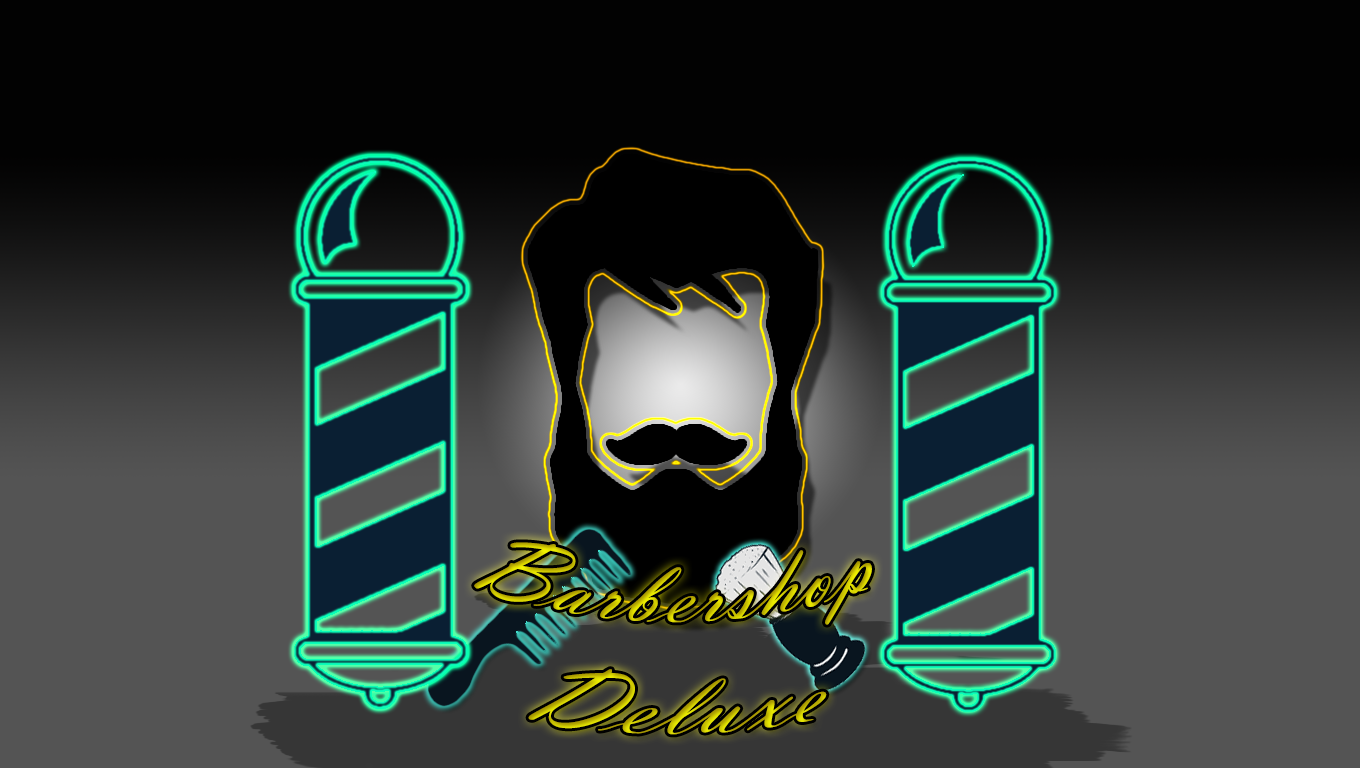
<style>
.page{position:relative;width:1360px;height:768px;background:#020202}
.page>*{position:absolute;margin:0}
.t1{font:93.4px "VladimirScript"}
</style>
<div class="page">
<p class="t1" style="left:474px;top:542px;width:398px;height:193px;text-align:center">Barbershop<br>Deluxe</p>
</div>
